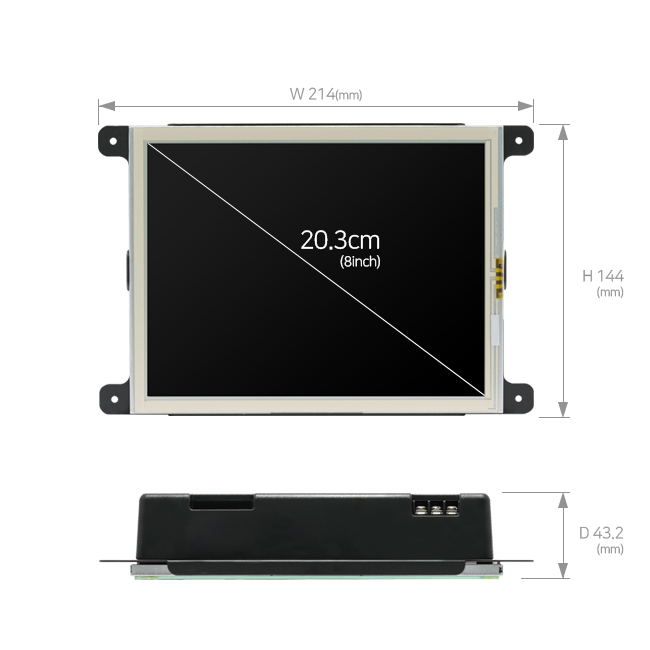
<style>
.page{position:relative;width:650px;height:650px;background:#ffffff}
.page>*{position:absolute;margin:0}
.t1{font:16px "NanumSquareR";letter-spacing:-0.03em;color:#939393}
.t2{font:12px "NanumSquareR";letter-spacing:-0.03em;color:#939393}
.t3{font:14px/18px "NanumSquareR";letter-spacing:-0.03em;color:#ffffff}
.t4{font:25px/18px "NanumSquareR";letter-spacing:-0.03em;color:#ffffff}
.t5{font:16px/15px "NanumSquareR";letter-spacing:-0.03em;color:#939393}
.t6{font:12px/15px "NanumSquareR";letter-spacing:-0.03em;color:#939393}
</style>
<div class="page">
<p class="t1" style="left:289px;top:87px;width:73px;height:15px">W 214<span class="t2">(mm)</span></p>
<p class="t3" style="left:301px;top:230px;width:79px;height:39px;text-align:right"><span class="t4">20.3cm<br></span>(8inch)</p>
<p class="t5" style="left:583px;top:269px;width:41px;height:30px;text-align:right">H 144<br><span class="t6">(mm)</span></p>
<p class="t5" style="left:580px;top:526px;width:44px;height:30px;text-align:right">D 43.2<br><span class="t6">(mm)</span></p>
</div>
